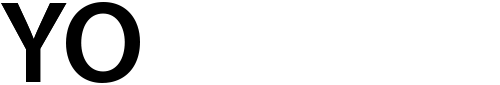
<style>
.page{position:relative;width:500px;height:85px;background:#ffffff}
.page>*{position:absolute;margin:0}
.t1{font:116.7px "MyriadPro-Semibold";color:#000000}
</style>
<div class="page">
<p class="t1" style="left:1px;top:3px;width:66px;height:79px">Y</p>
<p class="t1" style="left:1px;top:2px;width:139px;height:81px">YO</p>
</div>
